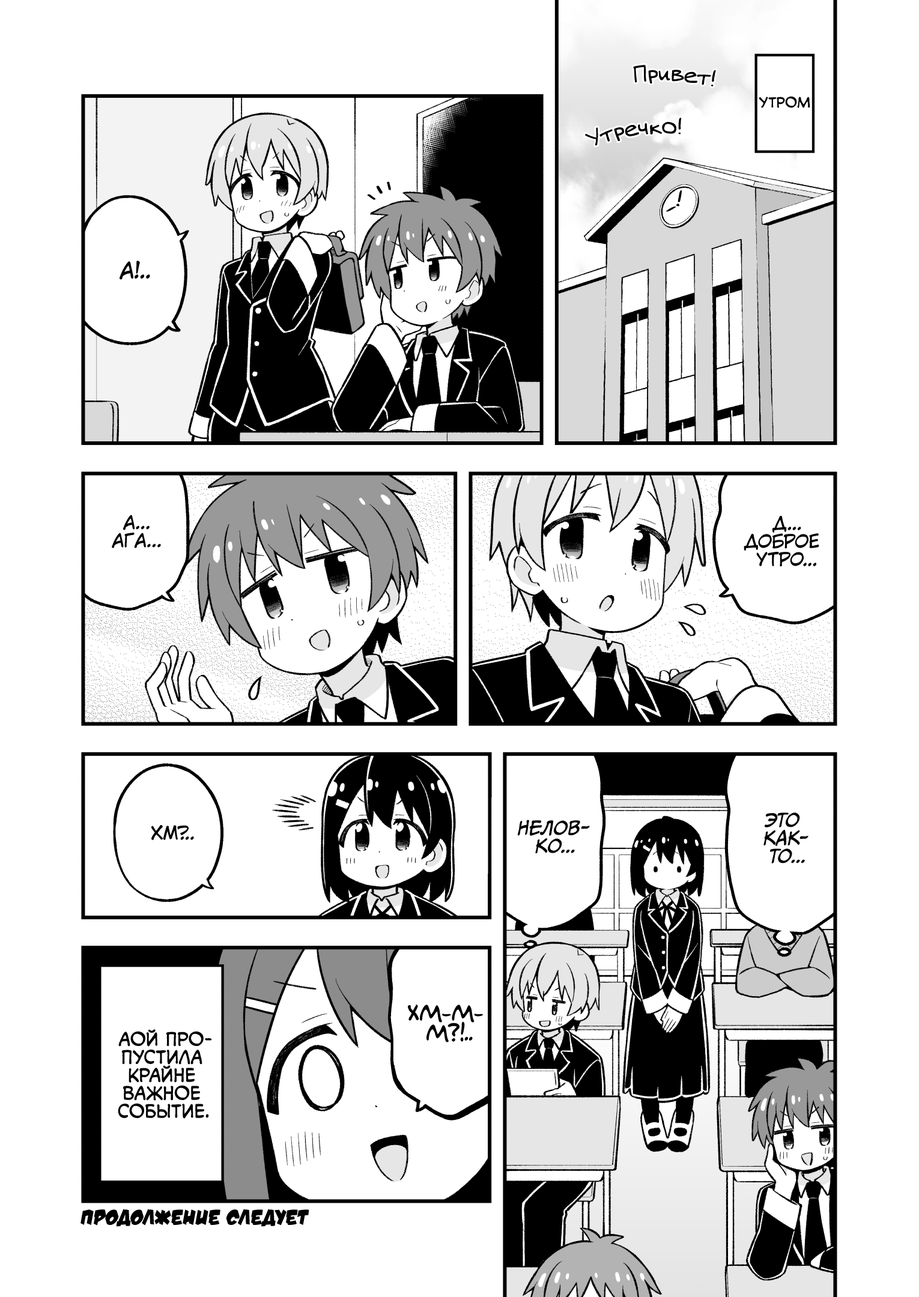
<style>
.page{position:relative;width:919px;height:1297px;background:#ffffff}
.page>*{position:absolute;margin:0}
.t1{font:21.6px "v_Augie";color:#000000}
.t2{font:13.8px "v_CCMonologous";color:#000000;text-transform:uppercase}
.t3{font:21.6px "KuraiVoice2";color:#000000;text-transform:uppercase}
.t4{font:18px "KuraiVoice2";color:#000000;text-transform:uppercase}
.t5{font:18px "CCMeanwhile";color:#000000;text-transform:uppercase;font-style:italic}
.t6{font:19.8px "AkbarPlain";color:#000000;text-transform:uppercase}
.t7{font:18px "v_CCMonologous";color:#000000;text-transform:uppercase}
.t8{font:21.6px "v_DamnNoisyKids";color:#000000;text-transform:uppercase}
</style>
<div class="page">
<p class="t1" style="left:633px;top:65px;width:83px;height:21px;rotate:3deg">Привет!</p>
<p class="t2" style="left:759px;top:96px;width:51px;height:12px">утром</p>
<p class="t1" style="left:585px;top:118px;width:97px;height:28px;rotate:-8deg">Утречко!</p>
<p class="t3" style="left:120px;top:261px;width:30px;height:19px">А!..</p>
<p class="t4" style="left:112px;top:515px;width:49px;height:33px;text-align:center">А...<br>Ага...</p>
<p class="t4" style="left:744px;top:516px;width:75px;height:51px;text-align:center">Д...<br>Доброе<br>утро...</p>
<p class="t5" style="left:518px;top:820px;width:72px;height:34px;text-align:center">Нелов-<br>ко...</p>
<p class="t5" style="left:763px;top:813px;width:46px;height:51px;text-align:center">Это<br>Как-<br>то...</p>
<p class="t4" style="left:151px;top:825px;width:43px;height:15px">Хм?..</p>
<p class="t6" style="left:408px;top:1005px;width:76px;height:38px;text-align:center">Хм-м-<br>м?!..</p>
<p class="t7" style="left:118px;top:1030px;width:94px;height:89px;text-align:center">Аой про-<br>пустила<br>крайне<br>важное<br>событие.</p>
<p class="t8" style="left:80px;top:1209px;width:229px;height:18px">Продолжение следует</p>
</div>
